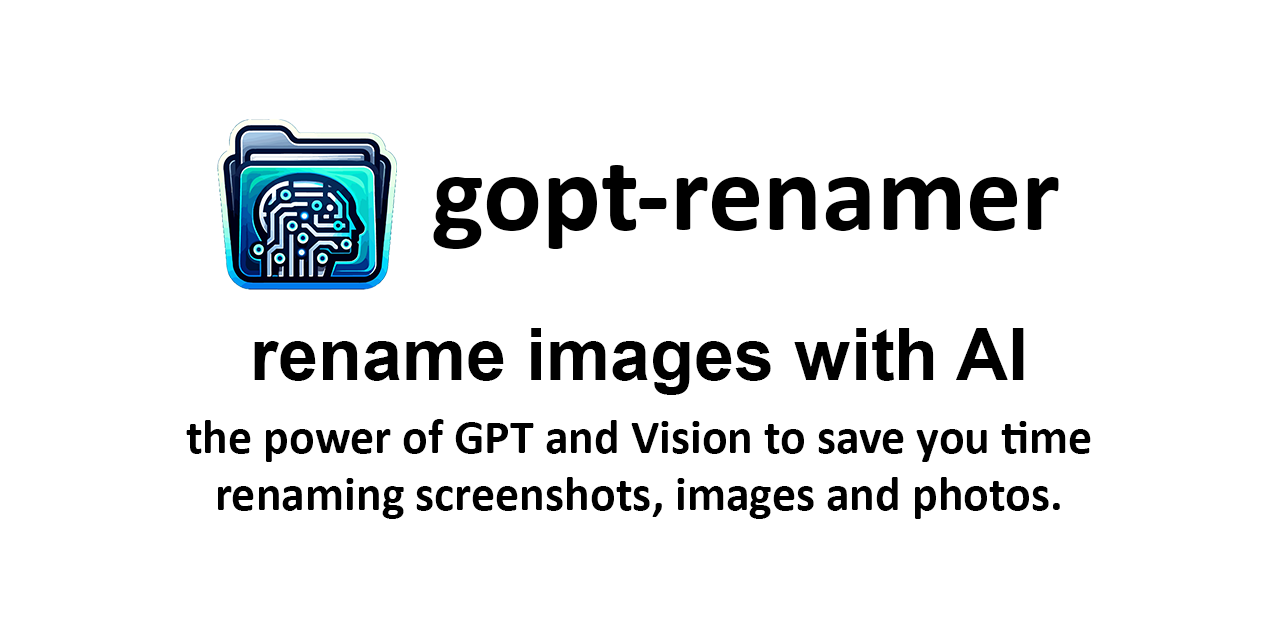
<style>
.page{position:relative;width:1280px;height:640px;background:#ffffff}
.page>*{position:absolute;margin:0}
.t1{font:110px "Calibri-Bold";color:#000000}
.t2{font:72px "Arial-BoldMT";color:#000000}
.t3{font:48px "Calibri-Bold";color:#000000}
</style>
<div class="page">
<p class="t1" style="left:433px;top:165px;width:626px;height:84px">gopt-renamer</p>
<p class="t2" style="left:254px;top:328px;width:770px;height:67px">rename images with AI</p>
<p class="t3" style="left:186px;top:419px;width:905px;height:100px;text-align:center">the power of GPT and Vision to save you time<br>renaming screenshots, images and photos.</p>
</div>
